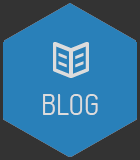
<style>
.page{position:relative;width:140px;height:160px;background:#2980b9}
.page>*{position:absolute;margin:0}
.t1{font:28px "Dosis-Book";color:#dcdcdc}
</style>
<div class="page">
<p class="t1" style="left:43px;top:94px;width:55px;height:21px">BLOG</p>
</div>
